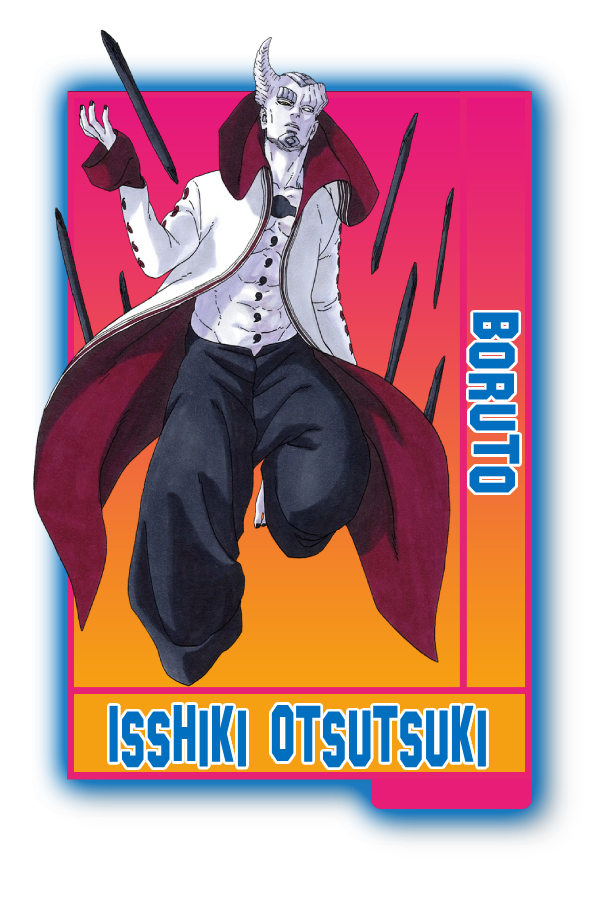
<style>
.page{position:relative;width:600px;height:900px;background:#ffffff}
.page>*{position:absolute;margin:0}
.t1{font:64.7px "SFHollywoodHills";color:#016fbf}
.t2{font:80px "SFHollywoodHills";color:#016fbf;scale:0.67 1}
</style>
<div class="page">
<p class="t1" style="left:468px;top:312px;width:52px;height:181px;rotate:90deg">Boruto</p>
<p class="t2" style="left:109px;top:705px;width:377px;height:63px">Isshiki Otsutsuki</p>
</div>
